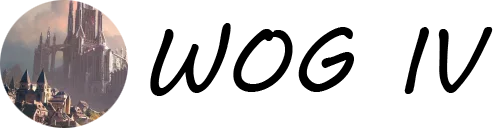
<style>
.page{position:relative;width:500px;height:128px;background:#ffffff}
.page>*{position:absolute;margin:0}
.t1{font:91px "MVBoli";color:#000000}
</style>
<div class="page">
<p class="t1" style="left:150px;top:23px;width:343px;height:73px">WOG IV</p>
</div>
